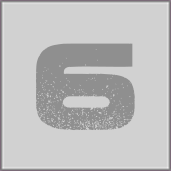
<style>
.page{position:relative;width:171px;height:171px;background:#d1d1d1}
.page>*{position:absolute;margin:0}
.t1{font:121px "Coalition";color:#8f8f8f}
</style>
<div class="page">
<p class="t1" style="left:35px;top:43px;width:100px;height:88px">6</p>
<p class="t1" style="left:35px;top:43px;width:100px;height:88px">6</p>
<p class="t1" style="left:35px;top:43px;width:100px;height:88px">6</p>
</div>
